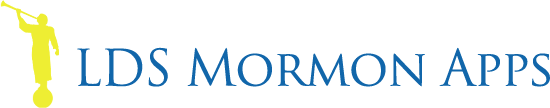
<style>
.page{position:relative;width:550px;height:108px;background:#ffffff}
.page>*{position:absolute;margin:0}
.t1{font:49.1px "TrajanPro-Regular";letter-spacing:-0.025em;color:#1166aa}
</style>
<div class="page">
<p class="t1" style="left:77px;top:47px;width:473px;height:40px">LDS Mormon Apps</p>
</div>
